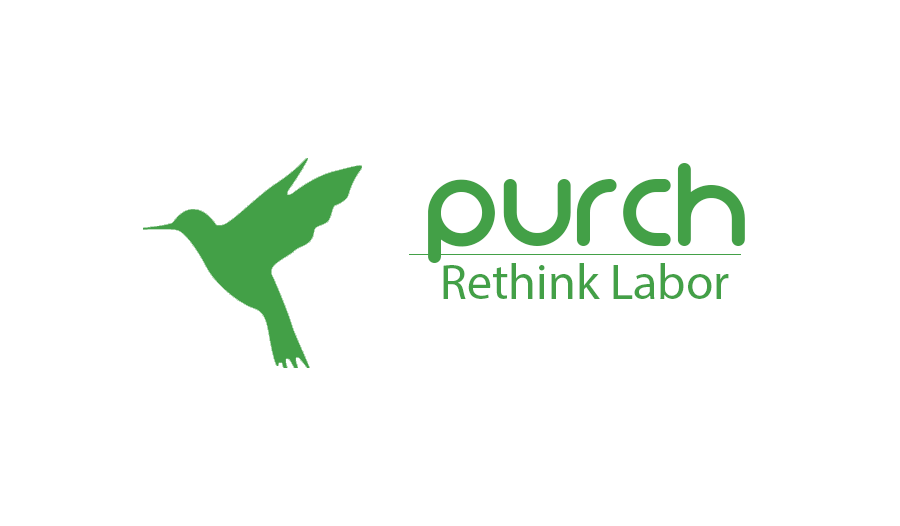
<style>
.page{position:relative;width:900px;height:526px;background:#ffffff}
.page>*{position:absolute;margin:0}
.t1{font:104.2px "Organocoloredversionat:logomagazin.comorgano-font";color:#43a047}
.t2{font:50px "MyriadPro-Regular";color:#43a047}
</style>
<div class="page">
<p class="t1" style="left:428px;top:163px;width:317px;height:100px">Purch</p>
<p class="t2" style="left:443px;top:263px;width:286px;height:36px">Rethink Labor</p>
</div>
